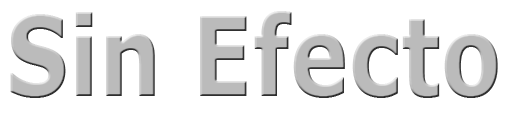
<style>
.page{position:relative;width:512px;height:128px;background:#ffffff}
.page>*{position:absolute;margin:0}
.t1{font:109.7px "Verdana-Bold";color:#bbbbbb;scale:0.81 1}
</style>
<div class="page">
<p class="t1" style="left:10px;top:11px;width:488px;height:87px">Sin Efecto</p>
</div>
